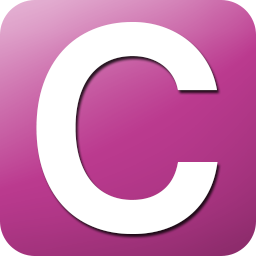
<style>
.page{position:relative;width:256px;height:256px;background:#ffffff}
.page>*{position:absolute;margin:0}
.t1{font:319.2px "Vrinda-Bold";color:#ffffff}
</style>
<div class="page">
<p class="t1" style="left:36px;top:22px;width:182px;height:212px">C</p>
</div>
